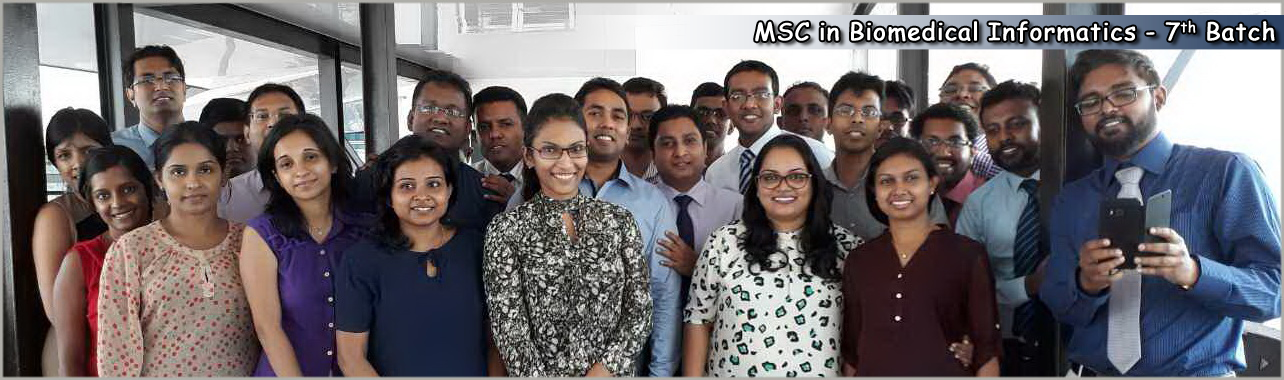
<style>
.page{position:relative;width:1284px;height:380px}
.page>*{position:absolute;margin:0}
.t1{font:24px "ComicSansMS";letter-spacing:0.025em;color:#ffffff;font-weight:bold}
</style>
<div class="page">
<p class="t1" style="left:755px;top:20px;width:520px;height:22px">MSC in Biomedical Informatics - 7th Batch</p>
</div>
